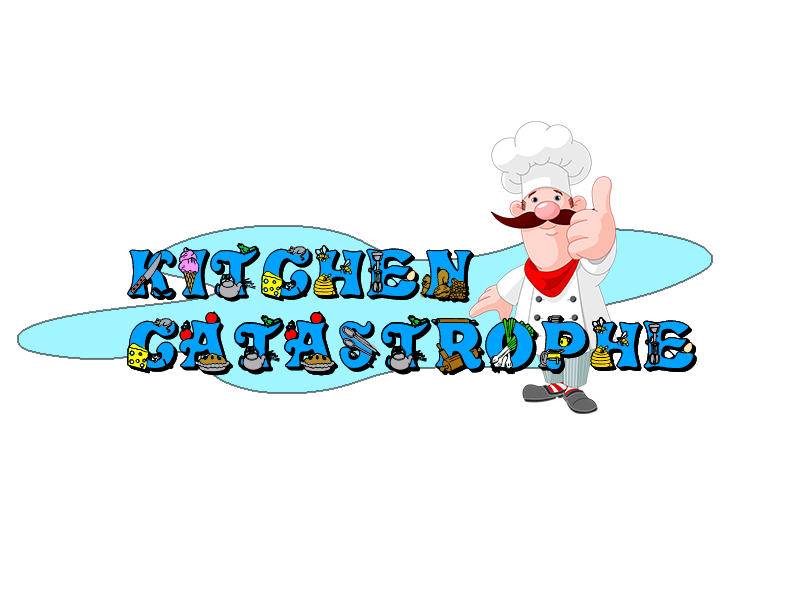
<style>
.page{position:relative;width:800px;height:600px;background:#ffffff}
.page>*{position:absolute;margin:0}
.t1{font:60px "KitchenKapersII";color:#000000}
</style>
<div class="page">
<p class="t1" style="left:127px;top:243px;width:570px;height:133px">Kitchen <br>Catastrophe</p>
</div>
